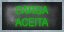
<style>
.page{position:relative;width:64px;height:32px}
.page>*{position:absolute;margin:0}
.t1{font:11px/12px "ArialMT";letter-spacing:-0.04em;color:#0cb008;text-transform:uppercase;scale:0.85 1}
</style>
<div class="page">
<p class="t1" style="left:15px;top:5px;width:34px;height:22px;text-align:center">carga<br>aceitA</p>
</div>
